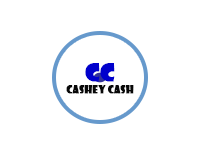
<style>
.page{position:relative;width:200px;height:150px;background:#ffffff}
.page>*{position:absolute;margin:0}
.t1{font:10px "ShowcardGothic-Reg";color:#080808;font-weight:bold}
.t2{font:10px "HandOfSeanDemo";color:#fafafa;font-weight:bold}
.t3{font:24px "ShowcardGothic-Reg";color:#0000cc;font-weight:bold}
</style>
<div class="page">
<p class="t1" style="left:66px;top:63px;width:68px;height:31px;text-align:center"><span class="t2"><br><br></span><span class="t3">CC<br></span>cashey cash</p>
</div>
